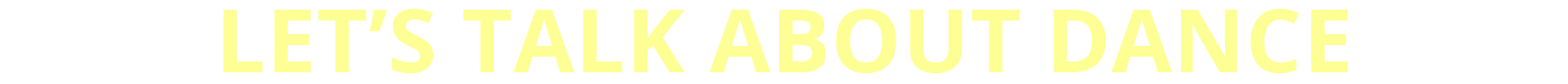
<style>
.page{position:relative;width:1568px;height:84px;background:#ffffff}
.page>*{position:absolute;margin:0}
.t1{font:88.2px "OpenSans-Bold";letter-spacing:0.01em;color:#fdff94;text-transform:uppercase}
</style>
<div class="page">
<p class="t1" style="left:223px;top:9px;width:1125px;height:65px">let’s talk about dance</p>
</div>
